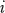
<style>
.page{position:relative;width:5px;height:13px;background:#ffffff}
.page>*{position:absolute;margin:0}
.t1{font:18px "Baskerville-Italic";color:#212121}
</style>
<div class="page">
<p class="t1" style="left:0px;top:0px;width:5px;height:13px">i</p>
</div>
